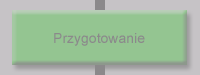
<style>
.page{position:relative;width:200px;height:75px;background:#94c591}
.page>*{position:absolute;margin:0}
.t1{font:14px "ArialMT";color:#8b898b}
</style>
<div class="page">
<p class="t1" style="left:54px;top:33px;width:91px;height:13px">Przygotowanie</p>
</div>
